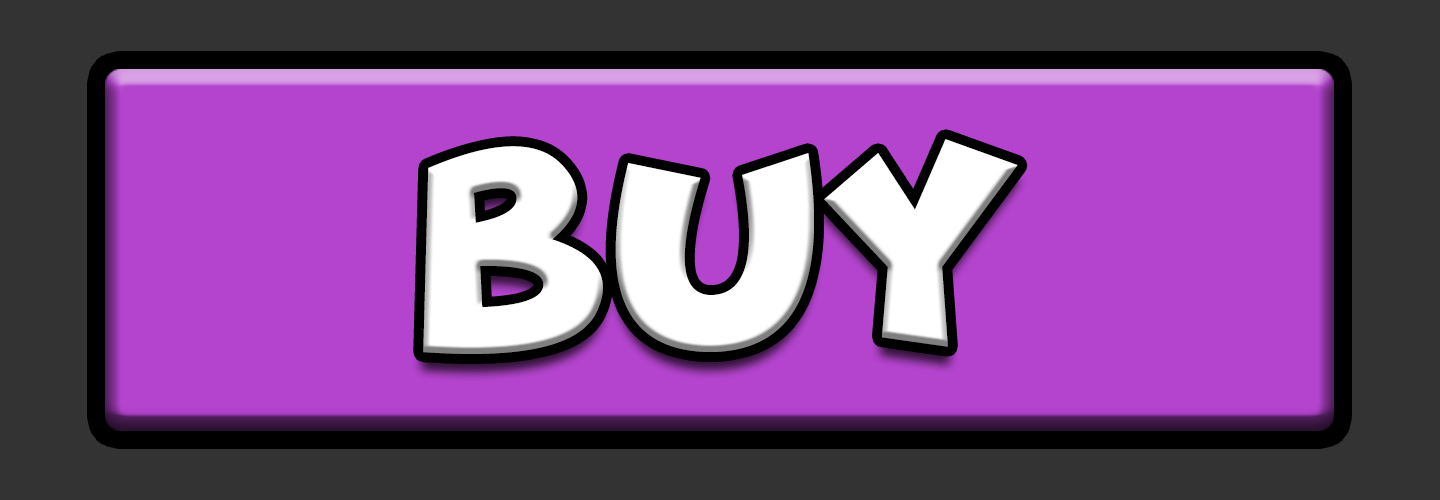
<style>
.page{position:relative;width:1440px;height:500px;background:#b444ce}
.page>*{position:absolute;margin:0}
.t1{font:290.6px "Funhouse";color:#ffffff;scale:0.95 1}
</style>
<div class="page">
<p class="t1" style="left:423px;top:139px;width:595px;height:215px">BUY</p>
</div>
